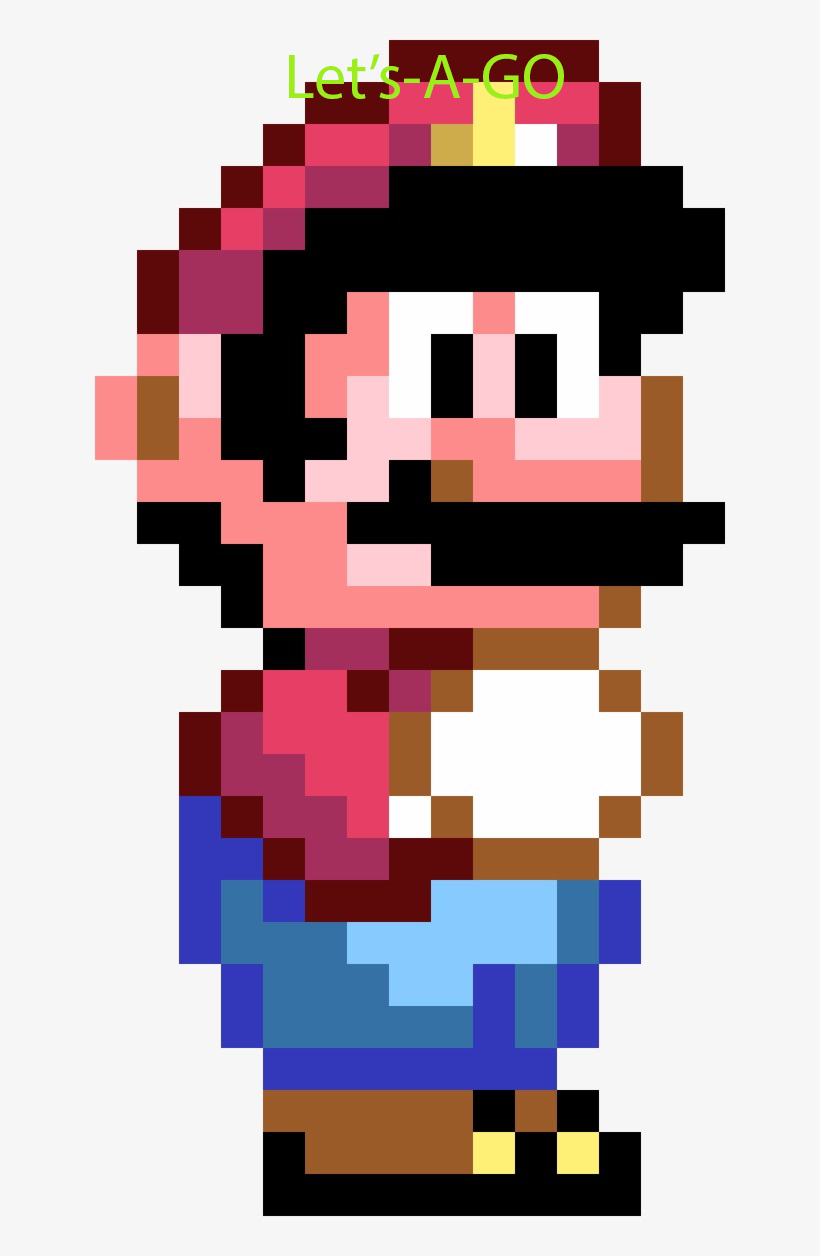
<style>
.page{position:relative;width:820px;height:1256px;background:#f6f6f6}
.page>*{position:absolute;margin:0}
.t1{font:64px "MyriadPro-Regular";color:#9ded1e}
</style>
<div class="page">
<p class="t1" style="left:289px;top:54px;width:275px;height:45px">Let’s-A-GO</p>
</div>
